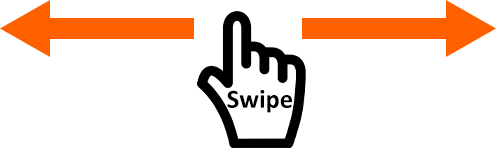
<style>
.page{position:relative;width:496px;height:149px;background:#ffffff}
.page>*{position:absolute;margin:0}
.t1{font:26.6px "Calibri-Bold";color:#000000}
</style>
<div class="page">
<p class="t1" style="left:227px;top:90px;width:65px;height:23px">Swipe</p>
</div>
